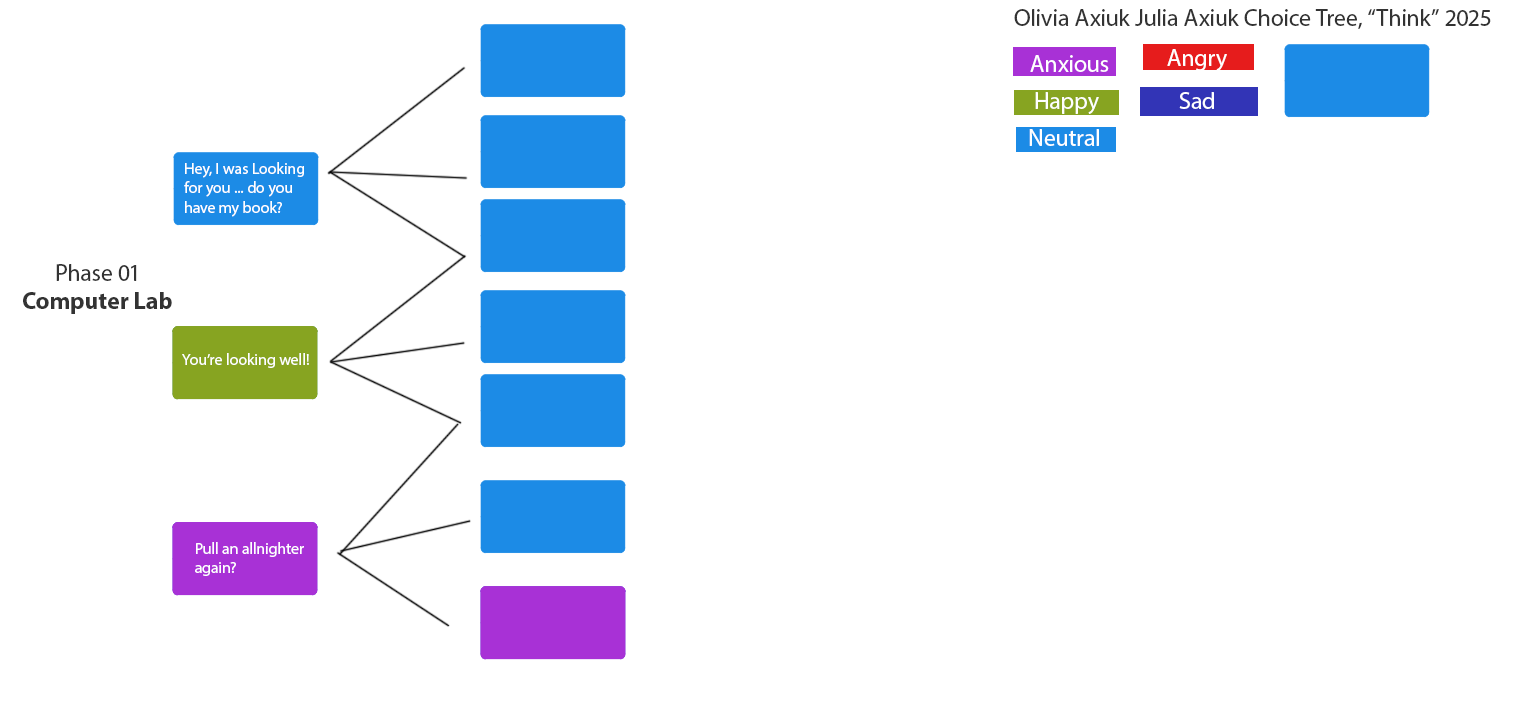
<style>
.page{position:relative;width:1516px;height:707px;background:#ffffff}
.page>*{position:absolute;margin:0}
.t1{font:24px "MyriadPro-Regular";color:#333333}
.t2{font:16px "MyriadPro-Regular";color:#ffffff}
.t3{font:24px "MyriadPro-Bold";color:#333333}
</style>
<div class="page">
<p class="t1" style="left:1014px;top:9px;width:477px;height:20px">Olivia Axiuk Julia Axiuk Choice Tree, “Think” 2025</p>
<p class="t2" style="left:184px;top:162px;width:120px;height:55px">Hey, I was Looking<br>for you ... do you <br>have my book?</p>
<p class="t1" style="left:56px;top:264px;width:81px;height:17px">Phase 01</p>
<p class="t3" style="left:23px;top:292px;width:149px;height:22px">Computer Lab</p>
<p class="t2" style="left:182px;top:353px;width:127px;height:15px">You’re looking well!</p>
<p class="t2" style="left:195px;top:542px;width:109px;height:34px">Pull an allnighter<br>again?</p>
</div>
